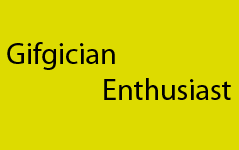
<style>
.page{position:relative;width:239px;height:150px;background:#dddb00}
.page>*{position:absolute;margin:0}
.t1{font:30.2px "MyriadPro-Regular";color:#000000}
</style>
<div class="page">
<p class="t1" style="left:7px;top:42px;width:224px;height:58px">Gifgician <br>               Enthusiast</p>
</div>
